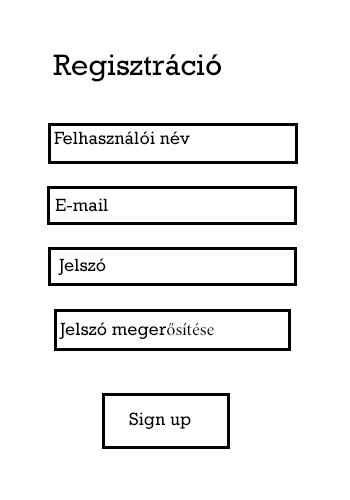
<style>
.page{position:relative;width:350px;height:500px;background:#ffffff}
.page>*{position:absolute;margin:0}
.t1{font:30px "Rockwell";color:#000000}
.t2{font:18px "Rockwell";color:#000000}
.t3{font:18px "MinionPro-Regular";color:#000000}
</style>
<div class="page">
<p class="t1" style="left:53px;top:54px;width:168px;height:28px">Regisztráció</p>
<p class="t2" style="left:54px;top:131px;width:136px;height:14px">Felhasználói név</p>
<p class="t2" style="left:55px;top:198px;width:53px;height:14px">E-mail</p>
<p class="t2" style="left:58px;top:258px;width:48px;height:17px">Jelszó</p>
<p class="t2" style="left:59px;top:322px;width:155px;height:17px">Jelszó meger<span class="t3">ősítése</span></p>
<p class="t2" style="left:129px;top:412px;width:62px;height:17px">Sign up</p>
</div>
